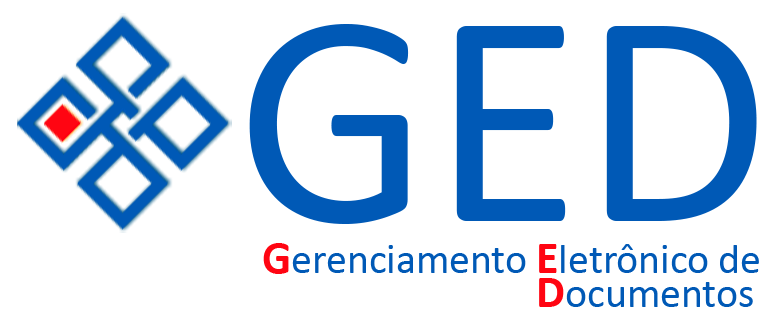
<style>
.page{position:relative;width:775px;height:325px;background:#ffffff}
.page>*{position:absolute;margin:0}
.t1{font:308.3px "Calibri";color:#0059b6}
.t2{font:41.7px "Calibri";color:#0059b6}
.t3{font:45.8px "Calibri-Bold";color:#ff0512}
</style>
<div class="page">
<p class="t1" style="left:249px;top:24px;width:508px;height:200px">GED</p>
<p class="t2" style="left:263px;top:243px;width:496px;height:31px"><span class="t3">G</span>erenciamento <span class="t3">E</span>letrônico de</p>
<p class="t2" style="left:539px;top:278px;width:214px;height:29px"><span class="t3">D</span>ocumentos</p>
</div>
